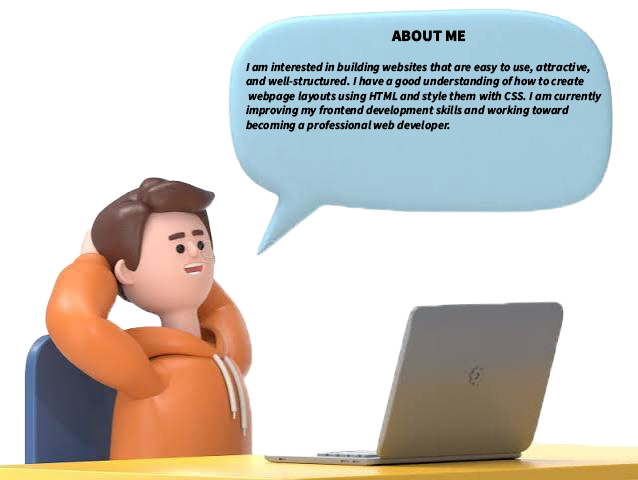
<style>
.page{position:relative;width:638px;height:480px;background:#ffffff}
.page>*{position:absolute;margin:0}
.t1{font:16px "SourceSans3Roman-Black";color:#000000}
.t2{font:12px "SourceSans3Italic-BoldItalic";color:#000000}
</style>
<div class="page">
<p class="t1" style="left:391px;top:30px;width:75px;height:12px">ABOUT ME</p>
<p class="t2" style="left:246px;top:62px;width:356px;height:70px">I am interested in building websites that are easy to use, attractive,<br>and well-structured. I have a good understanding of how to create<br> webpage layouts using HTML and style them with CSS. I am currently <br>improving my frontend development skills and working toward <br>becoming a professional web developer.</p>
</div>
